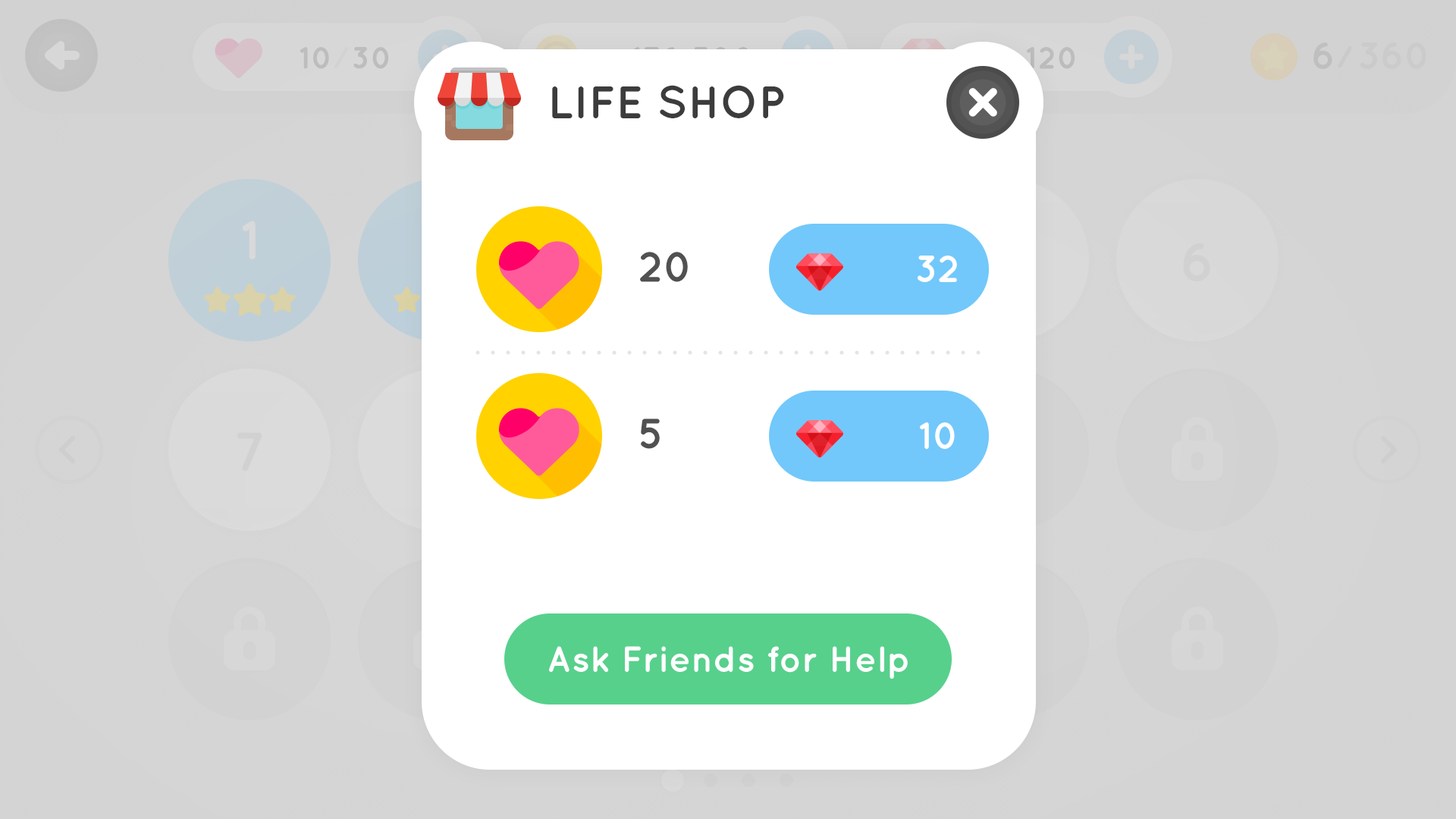
<style>
.page{position:relative;width:1456px;height:819px;background:#ffffff}
.page>*{position:absolute;margin:0}
.t1{font:45.5px "Quicksand-Bold";color:#3c3c3c;text-transform:uppercase}
.t2{font:42.5px "Quicksand-Bold";color:#515151}
.t3{font:37.9px "Quicksand-Bold";color:#ffffff}
.t4{font:36.4px "Quicksand-Bold";color:#ffffff}
</style>
<div class="page">
<p class="t1" style="left:552px;top:85px;width:232px;height:33px">LIFE SHOP</p>
<p class="t2" style="left:640px;top:252px;width:48px;height:30px">20</p>
<p class="t3" style="left:918px;top:256px;width:39px;height:26px">32</p>
<p class="t2" style="left:641px;top:419px;width:19px;height:30px">5</p>
<p class="t3" style="left:920px;top:422px;width:35px;height:27px">10</p>
<p class="t4" style="left:549px;top:646px;width:359px;height:33px">Ask Friends for Help</p>
</div>
